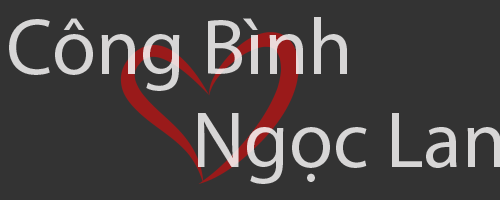
<style>
.page{position:relative;width:500px;height:200px;background:#333333}
.page>*{position:absolute;margin:0}
.t1{font:80px "MyriadPro-Regular";color:#d7d6d6}
</style>
<div class="page">
<p class="t1" style="left:9px;top:17px;width:338px;height:74px">Công Bình</p>
<p class="t1" style="left:198px;top:113px;width:303px;height:71px">Ngọc Lan</p>
</div>
